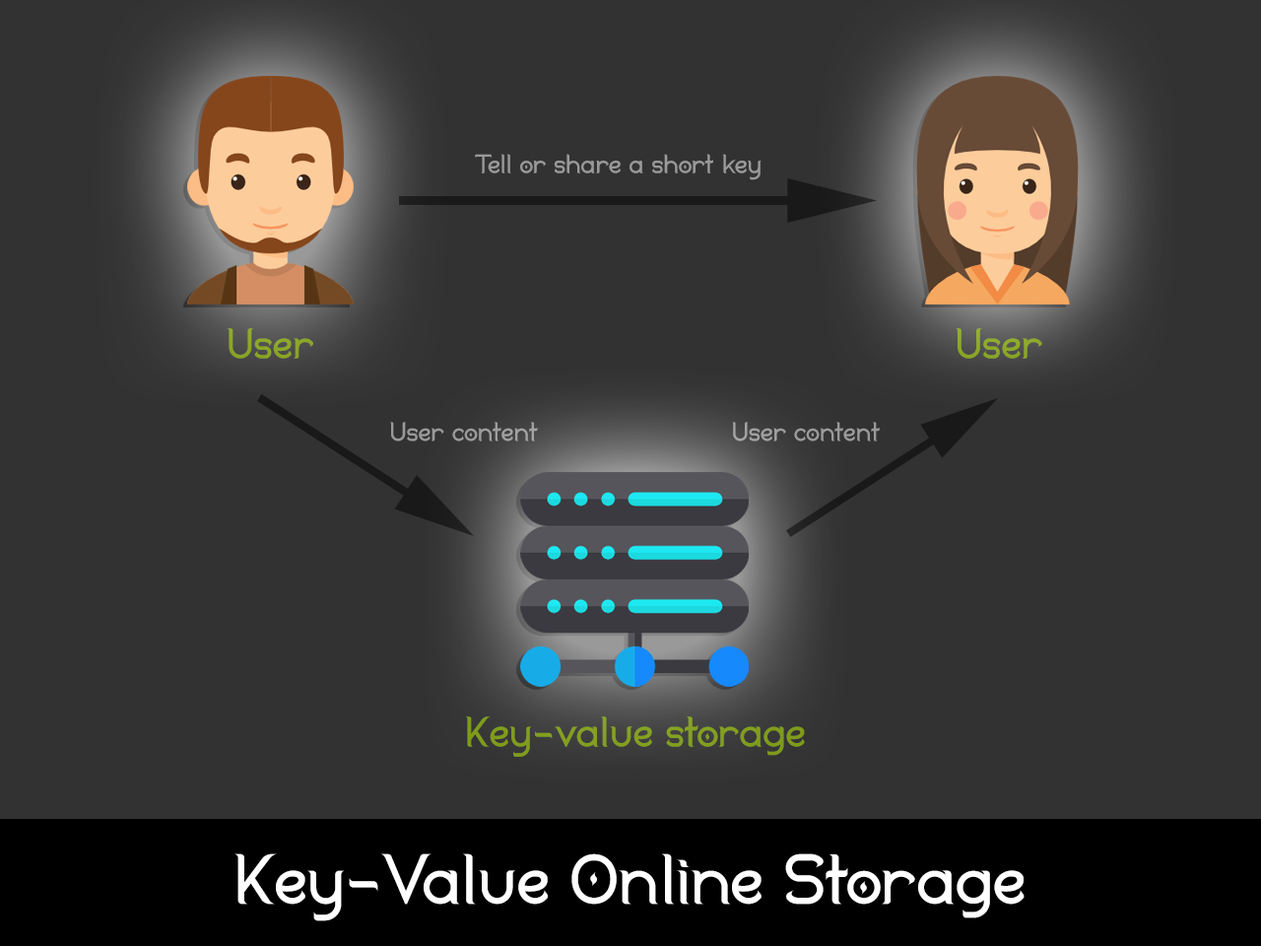
<style>
.page{position:relative;width:1261px;height:946px;background:#323232}
.page>*{position:absolute;margin:0}
.t1{font:26.8px "Duralith";color:#999999}
.t2{font:42.8px "Duralith";color:#8ba727}
.t3{font:42.8px "Duralith";color:#8da929}
.t4{font:26.8px "Duralith";color:#9b9b9b}
.t5{font:26.8px "Duralith";color:#9a9a9a}
.t6{font:42.8px "Duralith";color:#829e1e}
.t7{font:70.9px "Duralith";color:#ffffff}
</style>
<div class="page">
<p class="t1" style="left:475px;top:154px;width:286px;height:26px">Tell or share a short key</p>
<p class="t2" style="left:228px;top:328px;width:85px;height:31px">User</p>
<p class="t3" style="left:956px;top:328px;width:86px;height:31px">User</p>
<p class="t4" style="left:390px;top:422px;width:148px;height:19px">User content</p>
<p class="t5" style="left:732px;top:422px;width:148px;height:19px">User content</p>
<p class="t6" style="left:466px;top:716px;width:339px;height:41px">Key-value storage</p>
<p class="t7" style="left:234px;top:853px;width:790px;height:68px">Key-Value Online Storage</p>
</div>
